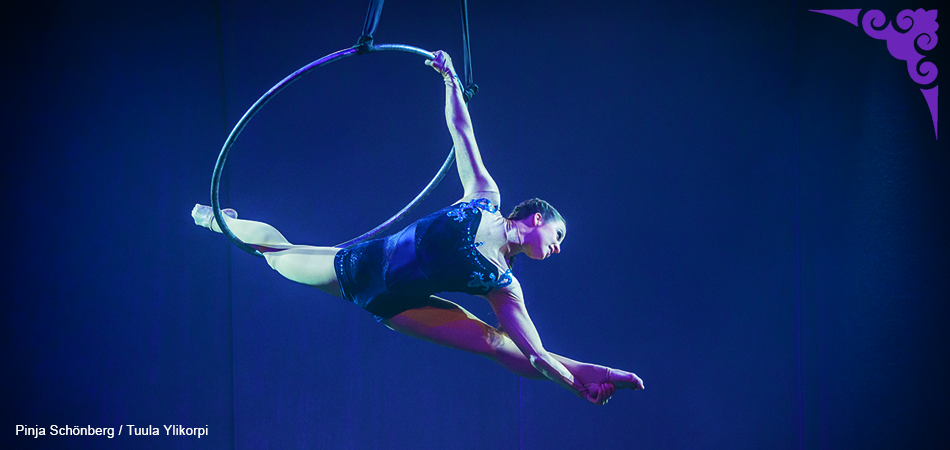
<style>
.page{position:relative;width:950px;height:450px}
.page>*{position:absolute;margin:0}
.t1{font:12.5px "ArialMT";letter-spacing:0.04em;color:#ffffff}
</style>
<div class="page">
<p class="t1" style="left:16px;top:425px;width:192px;height:13px">Pinja Schönberg / Tuula Ylikorpi</p>
</div>
